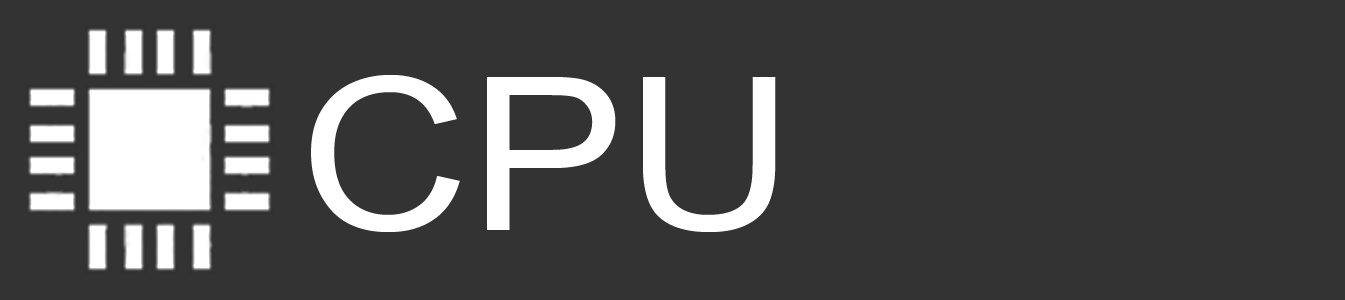
<style>
.page{position:relative;width:1345px;height:300px;background:#333333}
.page>*{position:absolute;margin:0}
.t1{font:214.4px "ArialNarrow";color:#ffffff;scale:1.33 1}
</style>
<div class="page">
<p class="t1" style="left:311px;top:75px;width:465px;height:157px">CPU</p>
</div>
